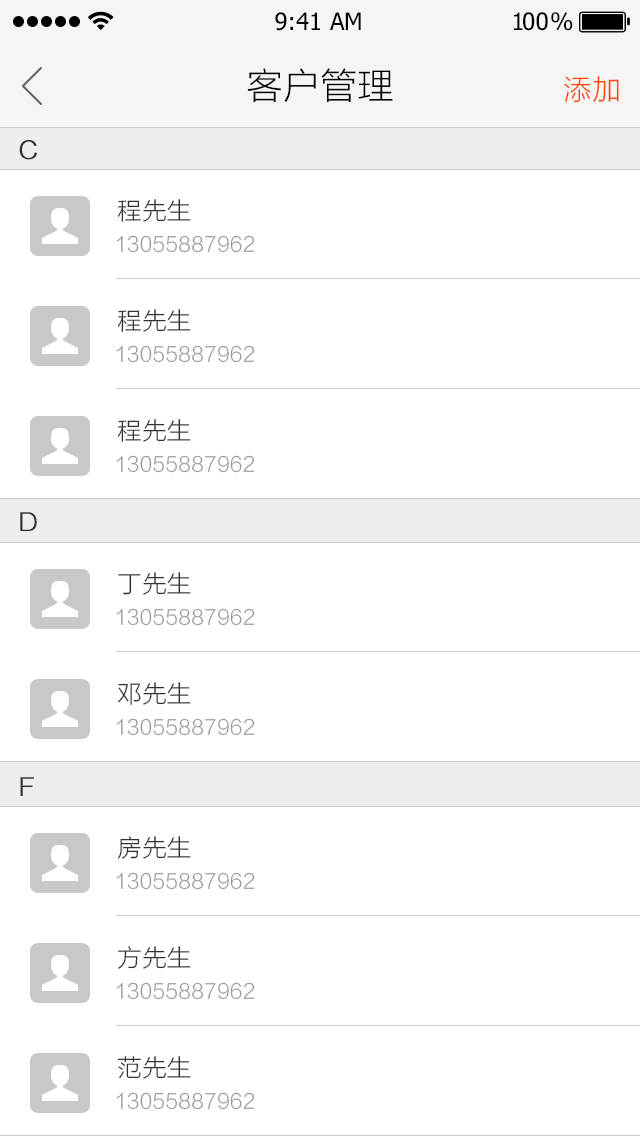
<style>
.page{position:relative;width:640px;height:1136px;background:#ffffff}
.page>*{position:absolute;margin:0}
.t1{font:24px "Tahoma";color:#000000}
.t2{font:24px "Tahoma";letter-spacing:-0.1em;color:#000000}
.t3{font:24px "Tahoma";letter-spacing:-0.25em;color:#000000}
.t4{font:36px "STHeitiSC-Light";color:#000000}
.t5{font:28px "STHeitiSC-Light";color:#ff4800}
.t6{font:24px "STHeitiSC-Light";color:#333333;font-weight:bold}
.t7{font:24px "STHeitiSC-Light";color:#333333}
.t8{font:20px "STHeitiSC-Light";color:#999999}
</style>
<div class="page">
<p class="t1" style="left:275px;top:12px;width:86px;height:19px">9:41 AM</p>
<p class="t2" style="left:514px;top:12px;width:59px;height:19px">1<span class="t1">0</span><span class="t3">0 </span>%</p>
<p class="t4" style="left:247px;top:68px;width:146px;height:34px">客户管理</p>
<p class="t5" style="left:564px;top:76px;width:55px;height:27px">添加</p>
<p class="t6" style="left:19px;top:139px;width:18px;height:21px">C</p>
<p class="t7" style="left:117px;top:199px;width:74px;height:23px">程先生</p>
<p class="t8" style="left:116px;top:235px;width:139px;height:18px">13055887962</p>
<p class="t7" style="left:117px;top:309px;width:74px;height:23px">程先生</p>
<p class="t8" style="left:116px;top:345px;width:139px;height:18px">13055887962</p>
<p class="t7" style="left:117px;top:419px;width:74px;height:23px">程先生</p>
<p class="t8" style="left:116px;top:455px;width:139px;height:18px">13055887962</p>
<p class="t6" style="left:20px;top:512px;width:17px;height:20px">D</p>
<p class="t7" style="left:118px;top:572px;width:73px;height:23px">丁先生</p>
<p class="t8" style="left:116px;top:608px;width:139px;height:18px">13055887962</p>
<p class="t7" style="left:117px;top:682px;width:74px;height:23px">邓先生</p>
<p class="t8" style="left:116px;top:718px;width:139px;height:18px">13055887962</p>
<p class="t6" style="left:20px;top:777px;width:14px;height:20px">F</p>
<p class="t7" style="left:118px;top:836px;width:73px;height:23px">房先生</p>
<p class="t8" style="left:116px;top:872px;width:139px;height:18px">13055887962</p>
<p class="t7" style="left:118px;top:946px;width:73px;height:23px">方先生</p>
<p class="t8" style="left:116px;top:982px;width:139px;height:18px">13055887962</p>
<p class="t7" style="left:117px;top:1056px;width:74px;height:23px">范先生</p>
<p class="t8" style="left:116px;top:1092px;width:139px;height:18px">13055887962</p>
</div>
